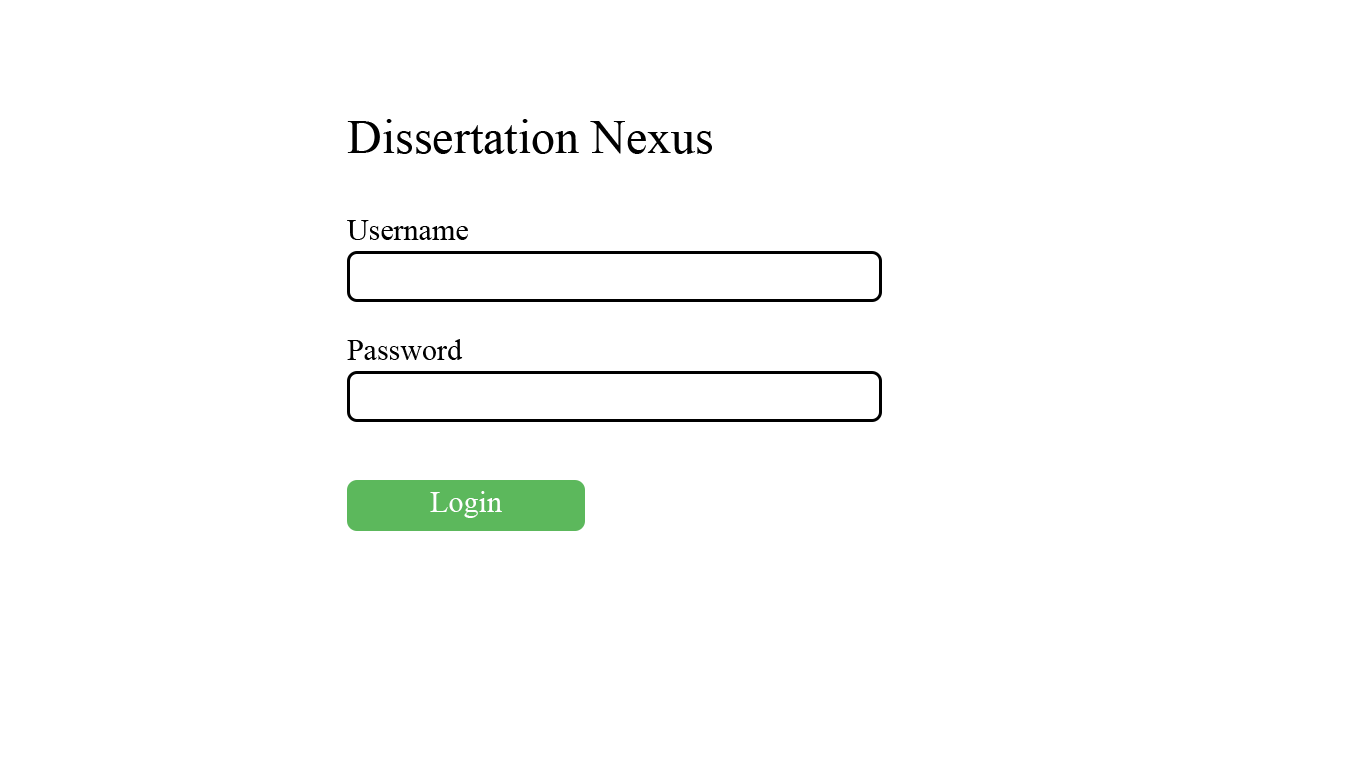
<style>
.page{position:relative;width:1366px;height:768px;background:#ffffff}
.page>*{position:absolute;margin:0}
.t1{font:48px "TimesNewRomanPSMT";color:#000000}
.t2{font:30px "TimesNewRomanPSMT";color:#000000}
.t3{font:30px "TimesNewRomanPSMT";color:#ffffff}
</style>
<div class="page">
<p class="t1" style="left:347px;top:119px;width:365px;height:35px">Dissertation Nexus</p>
<p class="t2" style="left:347px;top:220px;width:121px;height:20px">Username</p>
<p class="t2" style="left:347px;top:339px;width:116px;height:21px">Password</p>
<p class="t3" style="left:430px;top:491px;width:72px;height:27px">Login</p>
</div>
